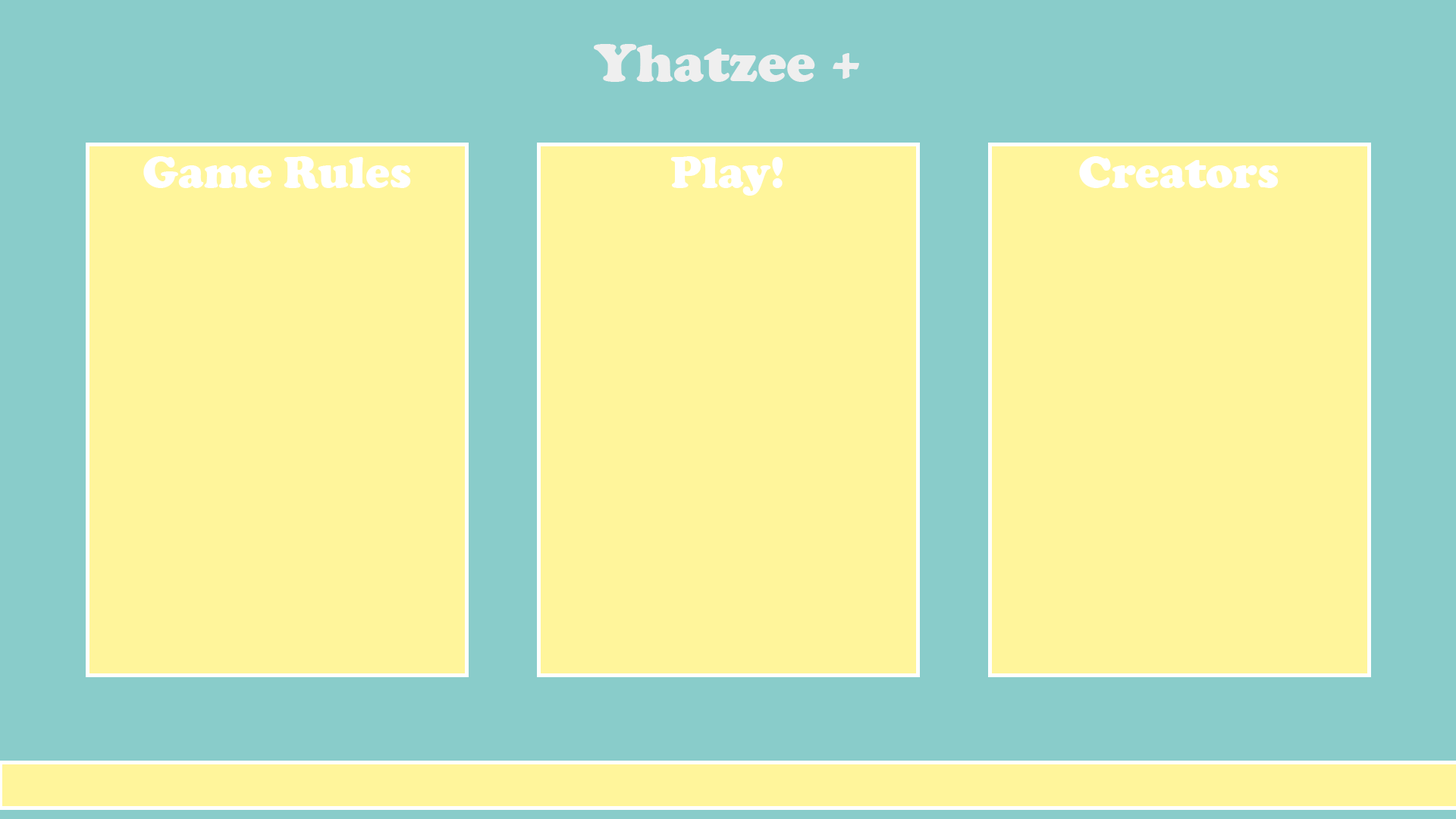
<style>
.page{position:relative;width:1456px;height:819px;background:#fff59b}
.page>*{position:absolute;margin:0}
.t1{font:54.6px "CooperBlack";color:#efefef}
.t2{font:45.5px "CooperBlack";color:#ffffff}
</style>
<div class="page">
<p class="t1" style="left:594px;top:44px;width:265px;height:38px">Yhatzee +</p>
<p class="t2" style="left:143px;top:156px;width:268px;height:33px">Game Rules</p>
<p class="t2" style="left:670px;top:156px;width:113px;height:40px">Play!</p>
<p class="t2" style="left:1079px;top:156px;width:200px;height:32px">Creators</p>
</div>
